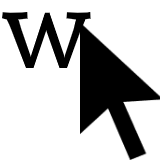
<style>
.page{position:relative;width:160px;height:160px;background:#ffffff}
.page>*{position:absolute;margin:0}
.t1{font:112px "Andada-Regular";color:#000000}
</style>
<div class="page">
<p class="t1" style="left:2px;top:12px;width:89px;height:56px">w</p>
</div>
